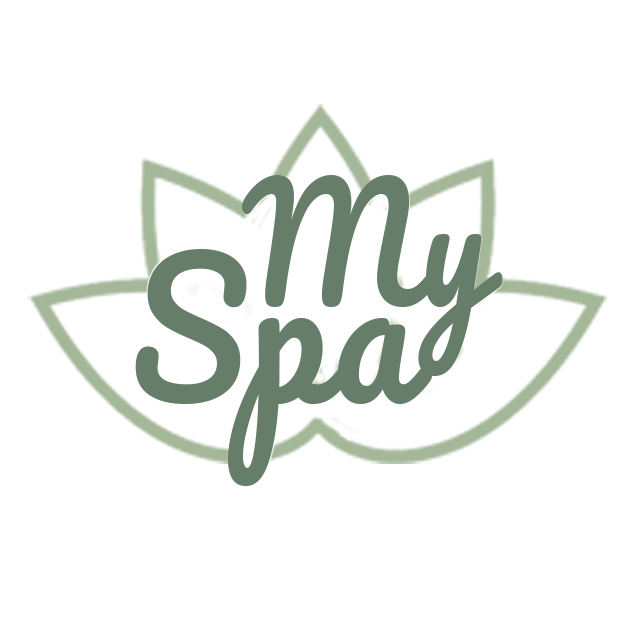
<style>
.page{position:relative;width:640px;height:640px;background:#ffffff}
.page>*{position:absolute;margin:0}
.t1{font:181.4px/96.2px "Pacifico-Regular";letter-spacing:0.015em;color:#667d69;scale:0.93 1}
.t2{font:181.4px/227.9px "Pacifico-Regular";letter-spacing:0.015em;color:#667d69;scale:0.93 1}
.t3{font:153.6px/189.7px "Pacifico-Regular";letter-spacing:0.015em;color:#667d69;scale:0.93 1}
</style>
<div class="page">
<p class="t1" style="left:135px;top:175px;width:368px;height:311px;text-align:center"><span class="t2">    </span><span class="t3">My <br></span>Spa</p>
</div>
